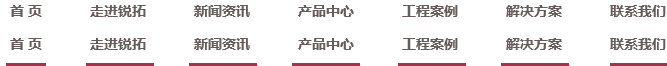
<style>
.page{position:relative;width:667px;height:66px;background:#ffffff}
.page>*{position:absolute;margin:0}
.t1{font:14px "MicrosoftYaHei-Bold";color:#645d5b}
</style>
<div class="page">
<p class="t1" style="left:10px;top:5px;width:656px;height:12px">首 页            走进锐拓            新闻资讯            产品中心            工程案例            解决方案            联系我们</p>
<p class="t1" style="left:10px;top:38px;width:656px;height:12px">首 页            走进锐拓            新闻资讯            产品中心            工程案例            解决方案            联系我们</p>
</div>
